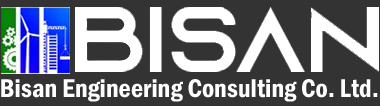
<style>
.page{position:relative;width:380px;height:106px;background:#333333}
.page>*{position:absolute;margin:0}
.t1{font:26.6px "FranklinGothic-DemiCond";color:#ffffff}
</style>
<div class="page">
<p class="t1" style="left:1px;top:79px;width:377px;height:23px">Bisan Engineering Consulting Co. Ltd.</p>
</div>
